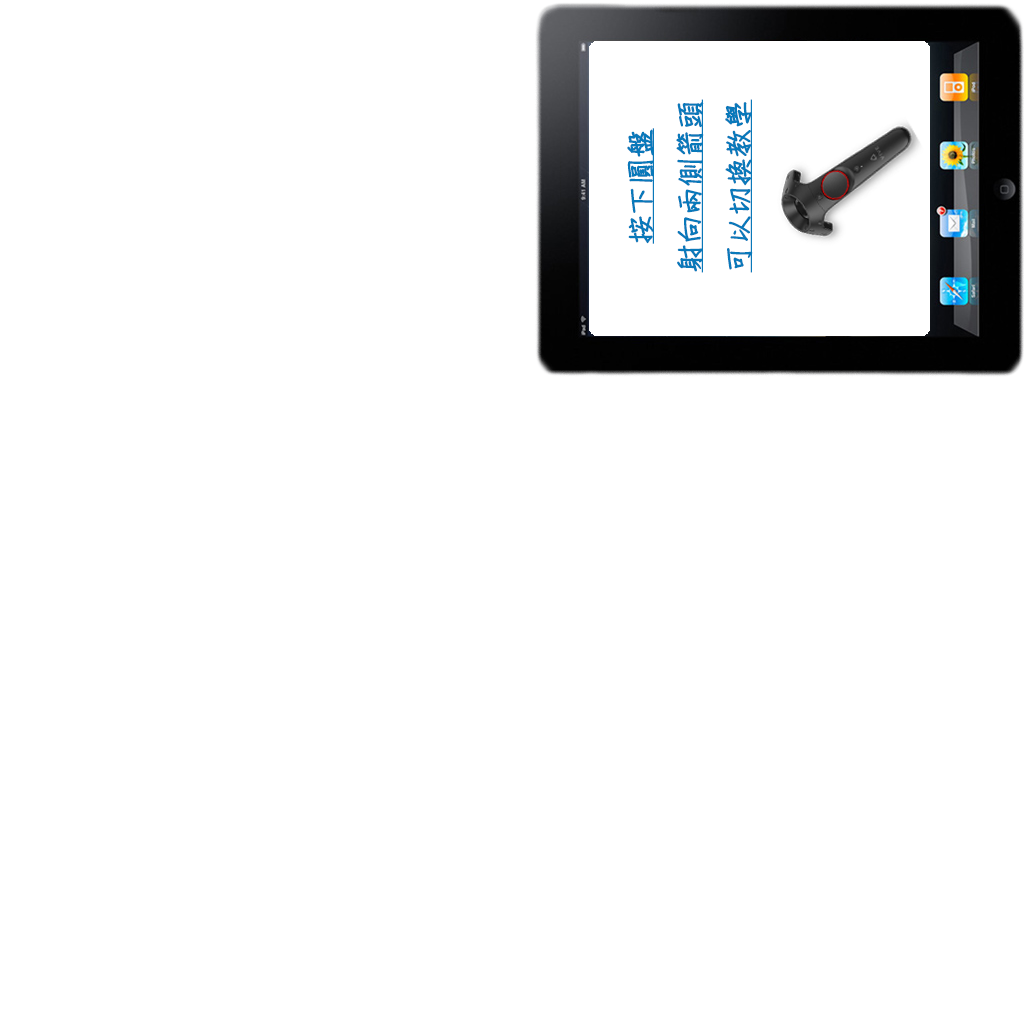
<style>
.page{position:relative;width:1024px;height:1024px;background:#ffffff}
.page>*{position:absolute;margin:0}
.t1{font:28px "DFChu-W4-WINP-BF";color:#0979ba;font-weight:bold;text-decoration:underline}
</style>
<div class="page">
<p class="t1" style="left:627px;top:99px;width:126px;height:174px;text-align:center;rotate:-90deg">按下圓盤<br>射向兩側箭頭<br>可以切換教學</p>
</div>
